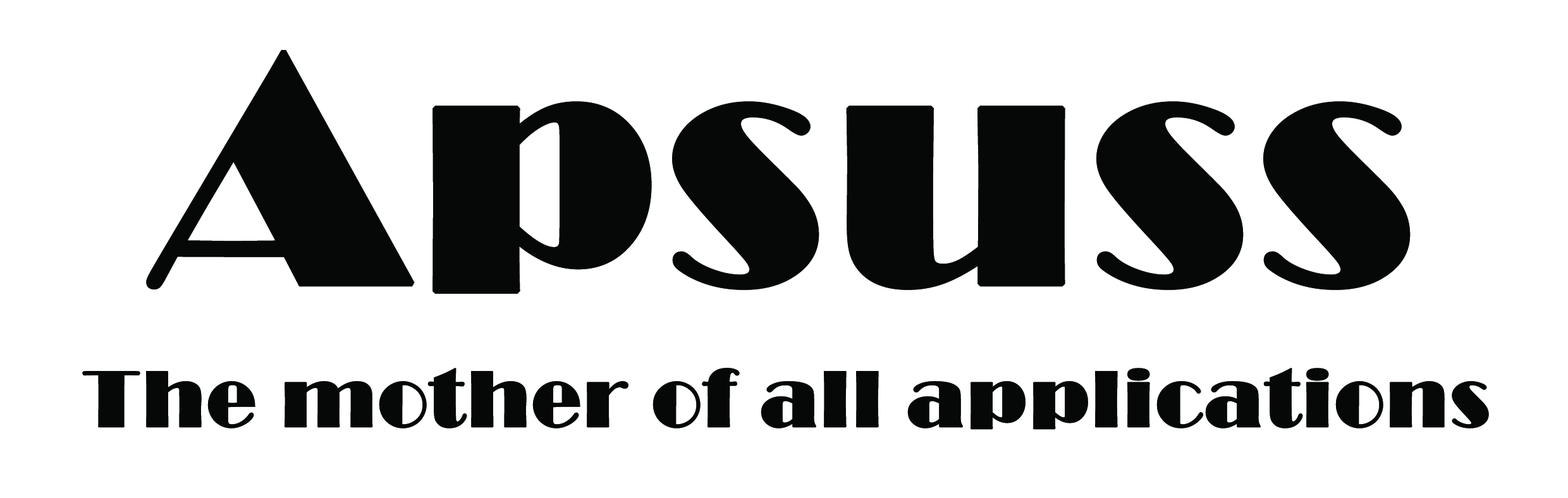
<style>
.page{position:relative;width:1568px;height:498px;background:#ffffff}
.page>*{position:absolute;margin:0}
.t1{font:82.3px "Broadway";color:#060808;font-weight:bold}
.t2{font:329.1px "Broadway";color:#060808;font-weight:bold}
</style>
<div class="page">
<p class="t1" style="left:82px;top:50px;width:1407px;height:380px;text-align:center"><span class="t2">Apsuss<br><br></span>The mother of all applications</p>
</div>
